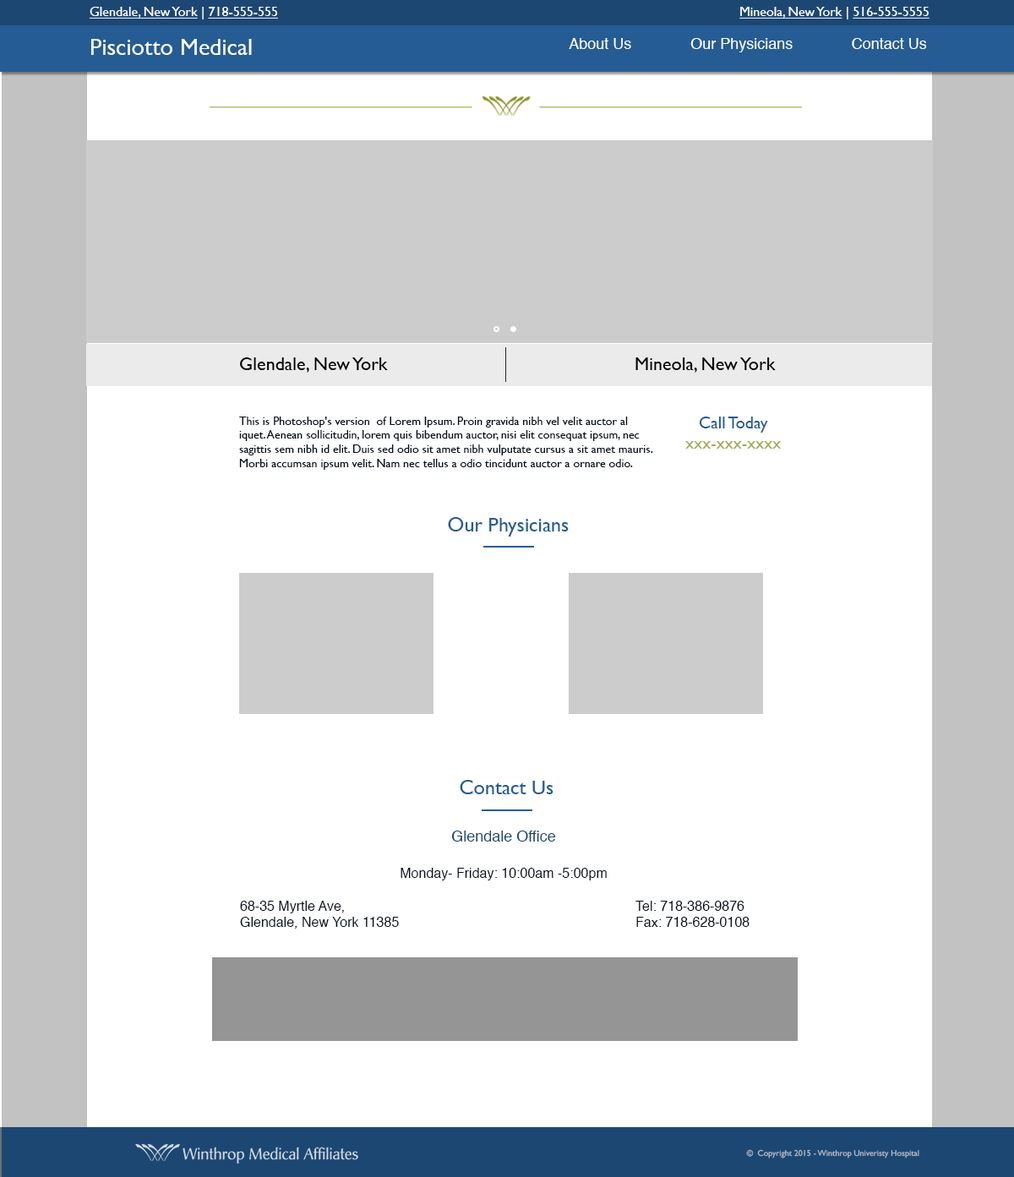
<style>
.page{position:relative;width:1014px;height:1177px;background:#ffffff}
.page>*{position:absolute;margin:0}
.t1{font:13.5px "GillSans";color:#ffffff;text-decoration:underline}
.t2{font:13.5px "GillSans";color:#ffffff}
.t3{font:23.7px "GillSans";color:#ffffff}
.t4{font:15.2px "Helvetica";color:#ffffff}
.t5{font:18.6px "GillSans";color:#000000}
.t6{font:11.8px "GillSans";color:#06111d}
.t7{font:16.9px "GillSans";color:#a2ac55}
.t8{font:16.9px "GillSans";color:#255c94}
.t9{font:20.3px "GillSans";color:#255c94}
.t10{font:13.5px "Helvetica";color:#06111d}
.t11{font:15.2px "Helvetica";color:#1c4773}
.t12{font:8.4px "GillSans";color:#b2bbc8}
</style>
<div class="page">
<p class="t1" style="left:90px;top:7px;width:839px;height:12px">Glendale, New York<span class="t2"> | </span>718-555-555                  Mineola, New York<span class="t2"> | </span>516-555-5555</p>
<p class="t3" style="left:91px;top:39px;width:161px;height:16px">Pisciotto Medical</p>
<p class="t4" style="left:568px;top:38px;width:358px;height:14px">About Us  Our Physicians  Contact Us</p>
<p class="t5" style="left:240px;top:357px;width:535px;height:15px">Glendale, New York         Mineola, New York</p>
<p class="t6" style="left:239px;top:416px;width:414px;height:54px">This is Photoshop's version  of Lorem Ipsum. Proin gravida nibh vel velit auctor al<br>iquet. Aenean sollicitudin, lorem quis bibendum auctor, nisi elit consequat ipsum, nec sagittis sem nibh id elit. Duis sed odio sit amet nibh vulputate cursus a sit amet mauris. Morbi accumsan ipsum velit. Nam nec tellus a odio tincidunt auctor a ornare odio.</p>
<p class="t7" style="left:685px;top:416px;width:96px;height:32px;text-align:center"><span class="t8">Call Today<br></span>xxx-xxx-xxxx</p>
<p class="t9" style="left:448px;top:517px;width:120px;height:19px">Our Physicians</p>
<p class="t9" style="left:459px;top:780px;width:94px;height:14px">Contact Us</p>
<p class="t10" style="left:240px;top:830px;width:509px;height:98px;text-align:center"><span class="t11">Glendale Office<br><br></span>Monday- Friday: 10:00am -5:00pm<br><br> 68-35 Myrtle Ave,           Tel: 718-386-9876<br> Glendale, New York 11385        Fax: 718-628-0108</p>
<p class="t12" style="left:746px;top:1149px;width:173px;height:9px">©  Copyright 2015 - Winthrop Univeristy Hospital</p>
</div>
